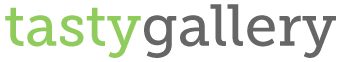
<style>
.page{position:relative;width:342px;height:62px;background:#ffffff}
.page>*{position:absolute;margin:0}
.t1{font:58.9px "MuseoSlab-500";color:#666666}
.t2{font:58.9px "MuseoSlab-500";color:#90cc5c}
</style>
<div class="page">
<p class="t1" style="left:5px;top:4px;width:331px;height:54px"><span class="t2">tasty</span>gallery</p>
</div>
